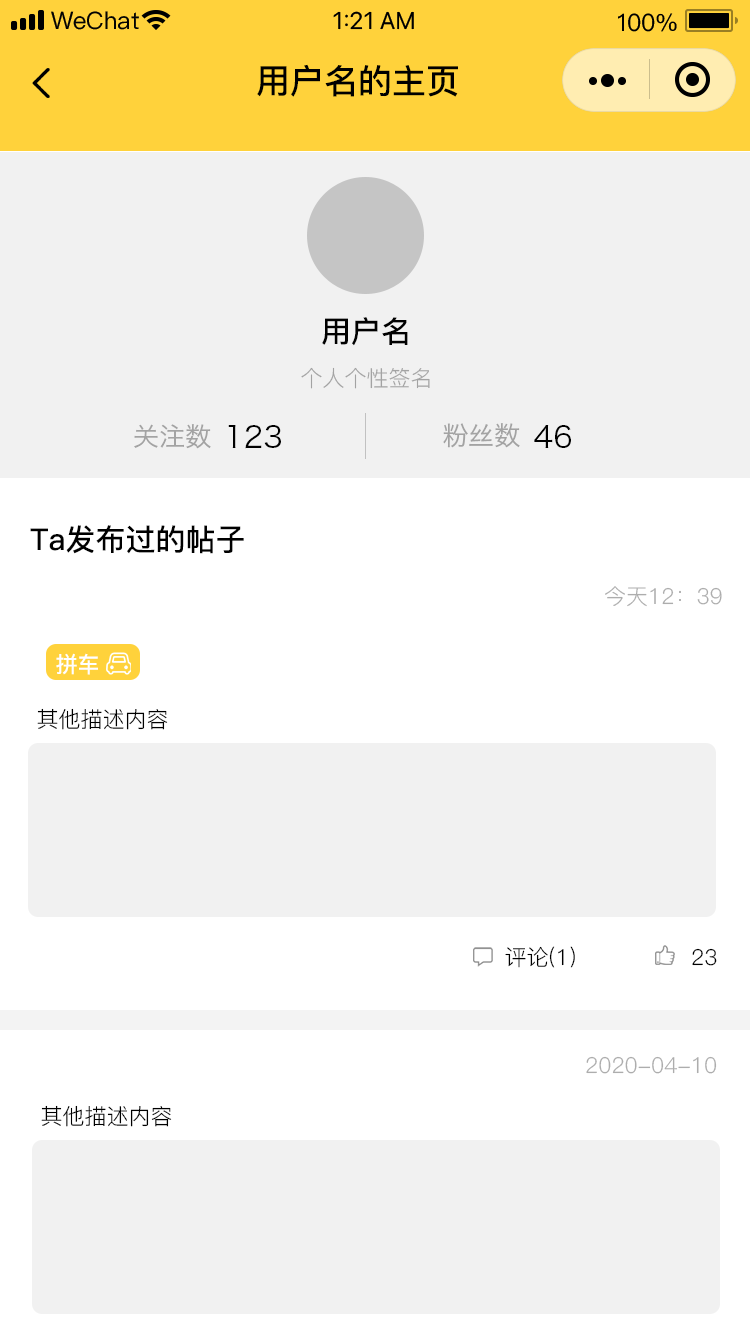
<style>
.page{position:relative;width:750px;height:1334px;background:#f1f1f1}
.page>*{position:absolute;margin:0}
.t1{font:34px "PingFang-SC-Bold";color:#000000}
.t2{font:30px "PingFang-SC-Bold";color:#000000}
.t3{font:22px "PingFang-SC-Regular";color:#a3a3a3}
.t4{font:26px "HiraginoSansGB-W3";color:#a3a3a3}
.t5{font:30px "HiraginoSansGB-W3";color:#000000}
.t6{font:22px "PingFang-SC-Regular";color:#adadad}
.t7{font:22px "PingFang-SC-Bold";color:#ffffff}
.t8{font:22px "PingFang-SC-Regular";color:#000000}
</style>
<div class="page">
<p class="t1" style="left:257px;top:64px;width:201px;height:33px">用户名的主页</p>
<p class="t2" style="left:322px;top:317px;width:86px;height:29px">用户名</p>
<p class="t3" style="left:301px;top:367px;width:129px;height:22px">个人个性签名</p>
<p class="t4" style="left:134px;top:424px;width:77px;height:25px">关注数</p>
<p class="t5" style="left:228px;top:425px;width:53px;height:24px">123</p>
<p class="t4" style="left:443px;top:423px;width:77px;height:25px">粉丝数</p>
<p class="t5" style="left:534px;top:425px;width:37px;height:23px">46</p>
<p class="t2" style="left:30px;top:525px;width:214px;height:29px">Ta发布过的帖子</p>
<p class="t6" style="left:605px;top:586px;width:117px;height:21px">今天12：39</p>
<p class="t7" style="left:56px;top:653px;width:42px;height:22px">拼车</p>
<p class="t8" style="left:37px;top:708px;width:131px;height:22px">其他描述内容</p>
<p class="t8" style="left:505px;top:946px;width:70px;height:22px">评论(1)</p>
<p class="t8" style="left:692px;top:948px;width:25px;height:18px">23</p>
<p class="t6" style="left:586px;top:1056px;width:131px;height:18px">2020-04-10</p>
<p class="t8" style="left:41px;top:1105px;width:131px;height:22px">其他描述内容</p>
</div>
